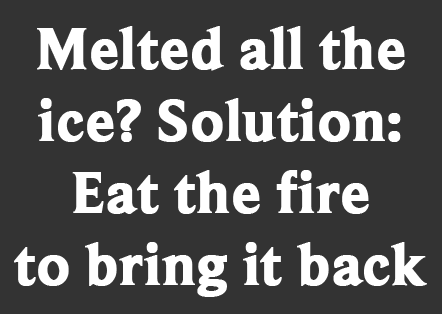
<style>
.page{position:relative;width:442px;height:314px;background:#333333}
.page>*{position:absolute;margin:0}
.t1{font:60px "BeaufortforLOL-Bold";color:#ffffff;font-weight:bold}
</style>
<div class="page">
<p class="t1" style="left:14px;top:26px;width:413px;height:271px;text-align:center">Melted all the<br>ice? Solution:<br>Eat the fire<br>to bring it back</p>
</div>
